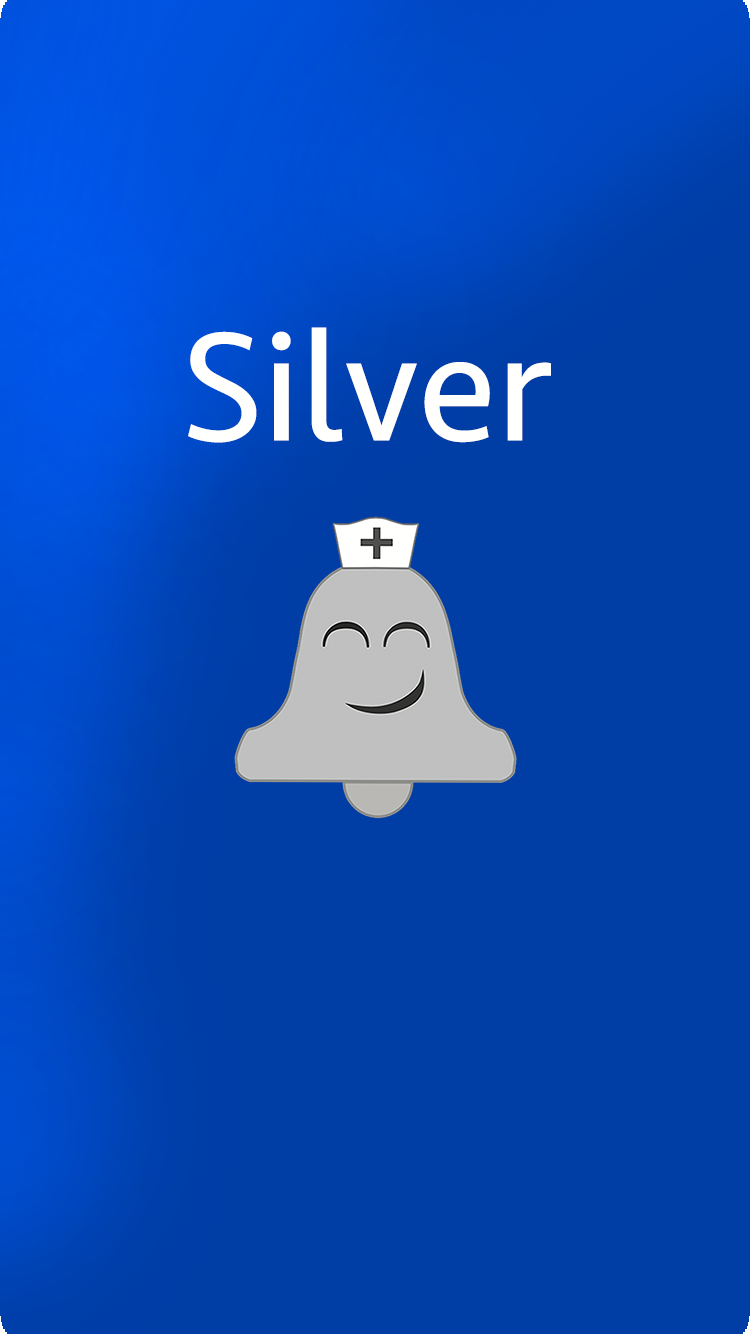
<style>
.page{position:relative;width:750px;height:1334px;background:#003da5}
.page>*{position:absolute;margin:0}
.t1{font:160px "Seravek";color:#fffffe}
</style>
<div class="page">
<p class="t1" style="left:188px;top:327px;width:363px;height:116px">Silver</p>
</div>
